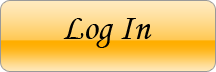
<style>
.page{position:relative;width:216px;height:72px}
.page>*{position:absolute;margin:0}
.t1{font:36px "MonotypeCorsiva";color:#000000}
</style>
<div class="page">
<p class="t1" style="left:63px;top:18px;width:89px;height:30px">Log In</p>
</div>
